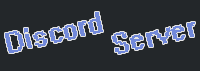
<style>
.page{position:relative;width:200px;height:71px;background:#23272a}
.page>*{position:absolute;margin:0}
.t1{font:33.3px/25px "System";color:#7289da}
</style>
<div class="page">
<p class="t1" style="left:5px;top:12px;width:190px;height:42px;rotate:-13deg">Discord<br>             Server</p>
</div>
